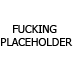
<style>
.page{position:relative;width:75px;height:75px;background:#ffffff}
.page>*{position:absolute;margin:0}
.t1{font:11px "Tahoma";color:#000000}
</style>
<div class="page">
<p class="t1" style="left:1px;top:25px;width:72px;height:21px;text-align:center">FUCKING <br>PLACEHOLDER</p>
</div>
